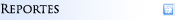
<style>
.page{position:relative;width:177px;height:20px}
.page>*{position:absolute;margin:0}
.t1{font:12px "TrajanPro-Regular";color:#050505}
</style>
<div class="page">
<p class="t1" style="left:1px;top:3px;width:58px;height:11px">Reportes</p>
</div>
